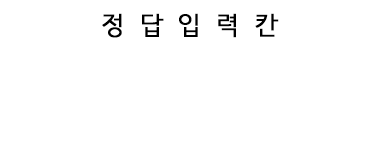
<style>
.page{position:relative;width:380px;height:150px;background:#ffffff}
.page>*{position:absolute;margin:0}
.t1{font:25px "HCRDotum";letter-spacing:0.53em;color:#000000;font-weight:bold}
</style>
<div class="page">
<p class="t1" style="left:102px;top:13px;width:177px;height:25px">정답입력칸</p>
</div>
